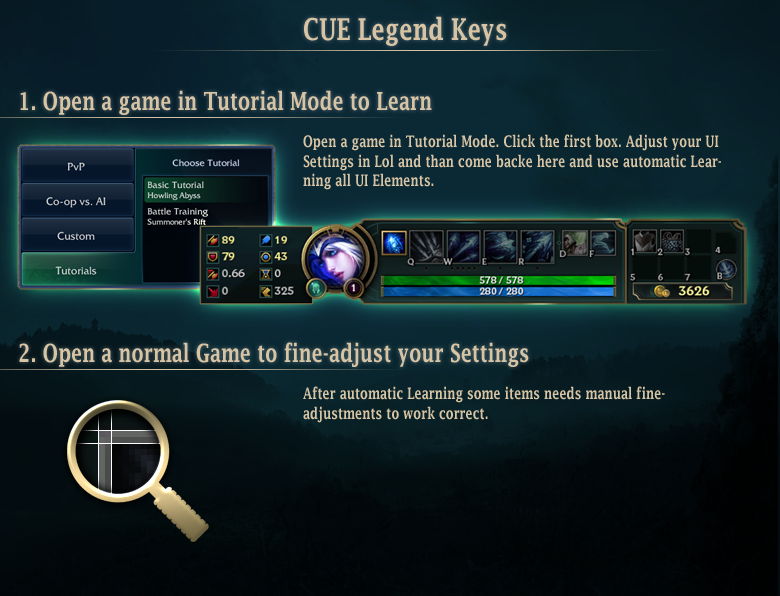
<style>
.page{position:relative;width:780px;height:596px}
.page>*{position:absolute;margin:0}
.t1{font:30px "LucidaFax-Demi";color:#d7c4a4;scale:0.75 1}
.t2{font:25px "LucidaFax-Demi";color:#d7c4a4;scale:0.75 1}
.t3{font:16px "LucidaFax-Demi";color:#d7c4a4;scale:0.75 1}
</style>
<div class="page">
<p class="t1" style="left:304px;top:16px;width:203px;height:30px">CUE Legend Keys</p>
<p class="t2" style="left:20px;top:90px;width:412px;height:25px">1. Open a game in Tutorial Mode to Learn</p>
<p class="t3" style="left:303px;top:134px;width:418px;height:56px">Open a game in Tutorial Mode. Click the first box. Adjust your UI Settings in Lol and than come backe here and use automatic Learning all UI Elements.</p>
<p class="t2" style="left:19px;top:342px;width:510px;height:25px">2. Open a normal Game to fine-adjust your Settings</p>
<p class="t3" style="left:303px;top:386px;width:362px;height:37px">After automatic Learning some items needs manual fine-adjustments to work correct.</p>
</div>
